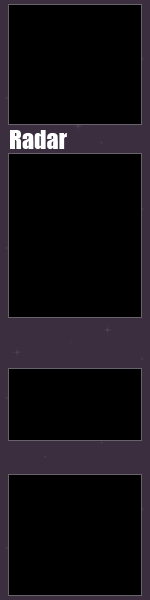
<style>
.page{position:relative;width:150px;height:600px;background:#000000}
.page>*{position:absolute;margin:0}
.t1{font:24px "Impact";color:#ffffff}
</style>
<div class="page">
<p class="t1" style="left:10px;top:130px;width:57px;height:19px">Radar</p>
</div>
